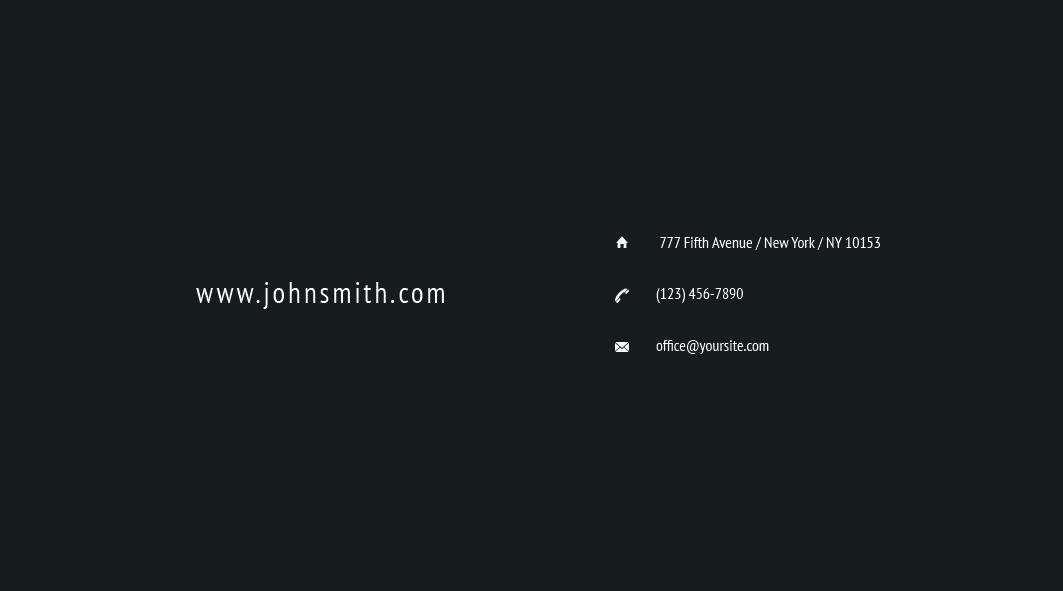
<style>
.page{position:relative;width:1063px;height:591px;background:#161b1b}
.page>*{position:absolute;margin:0}
.t1{font:16px "PTSans-Narrow";color:#ffffff}
.t2{font:29.2px "PTSans-Narrow";letter-spacing:0.1em;color:#ffffff}
</style>
<div class="page">
<p class="t1" style="left:660px;top:237px;width:221px;height:13px">777 Fifth Avenue / New York / NY 10153</p>
<p class="t2" style="left:196px;top:282px;width:248px;height:27px">www.johnsmith.com</p>
<p class="t1" style="left:656px;top:288px;width:87px;height:15px">(123) 456-7890</p>
<p class="t1" style="left:656px;top:340px;width:113px;height:14px">office@yoursite.com</p>
</div>
